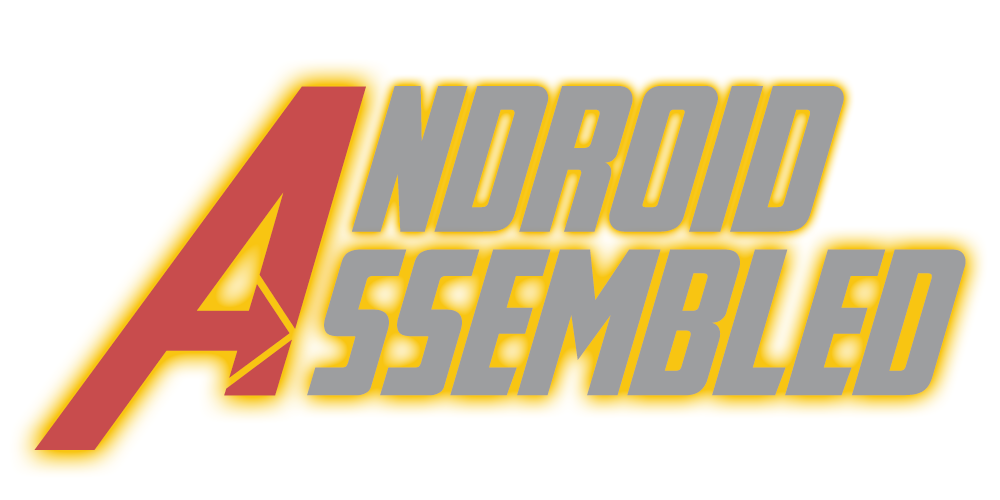
<style>
.page{position:relative;width:1000px;height:500px;background:#ffffff}
.page>*{position:absolute;margin:0}
.t1{font:300px "AvengeanceHeroicAvengerNormal";color:#c84c4d}
.t2{font:200px "AvengeanceHeroicAvengerNormal";color:#9d9ea0}
</style>
<div class="page">
<p class="t1" style="left:34px;top:86px;width:332px;height:364px">A</p>
<p class="t2" style="left:352px;top:86px;width:492px;height:146px">ndroid</p>
<p class="t2" style="left:307px;top:249px;width:659px;height:147px">ssembled</p>
</div>
